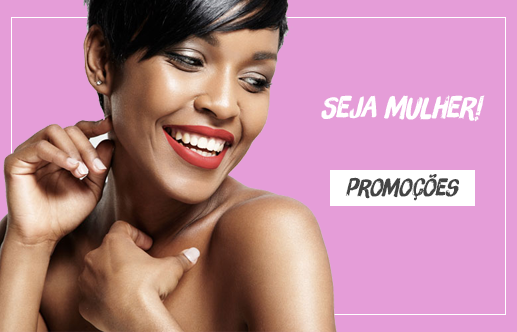
<style>
.page{position:relative;width:517px;height:332px;background:#e59dd8}
.page>*{position:absolute;margin:0}
.t1{font:30px "BrushUpTooW01-Regular";letter-spacing:-0.01em;color:#ffffff}
.t2{font:24px "BrushUpTooW01-Regular";letter-spacing:-0.01em;color:#444444}
</style>
<div class="page">
<p class="t1" style="left:321px;top:95px;width:164px;height:27px">Seja mulher!</p>
<p class="t2" style="left:345px;top:174px;width:115px;height:27px">promoções</p>
</div>
